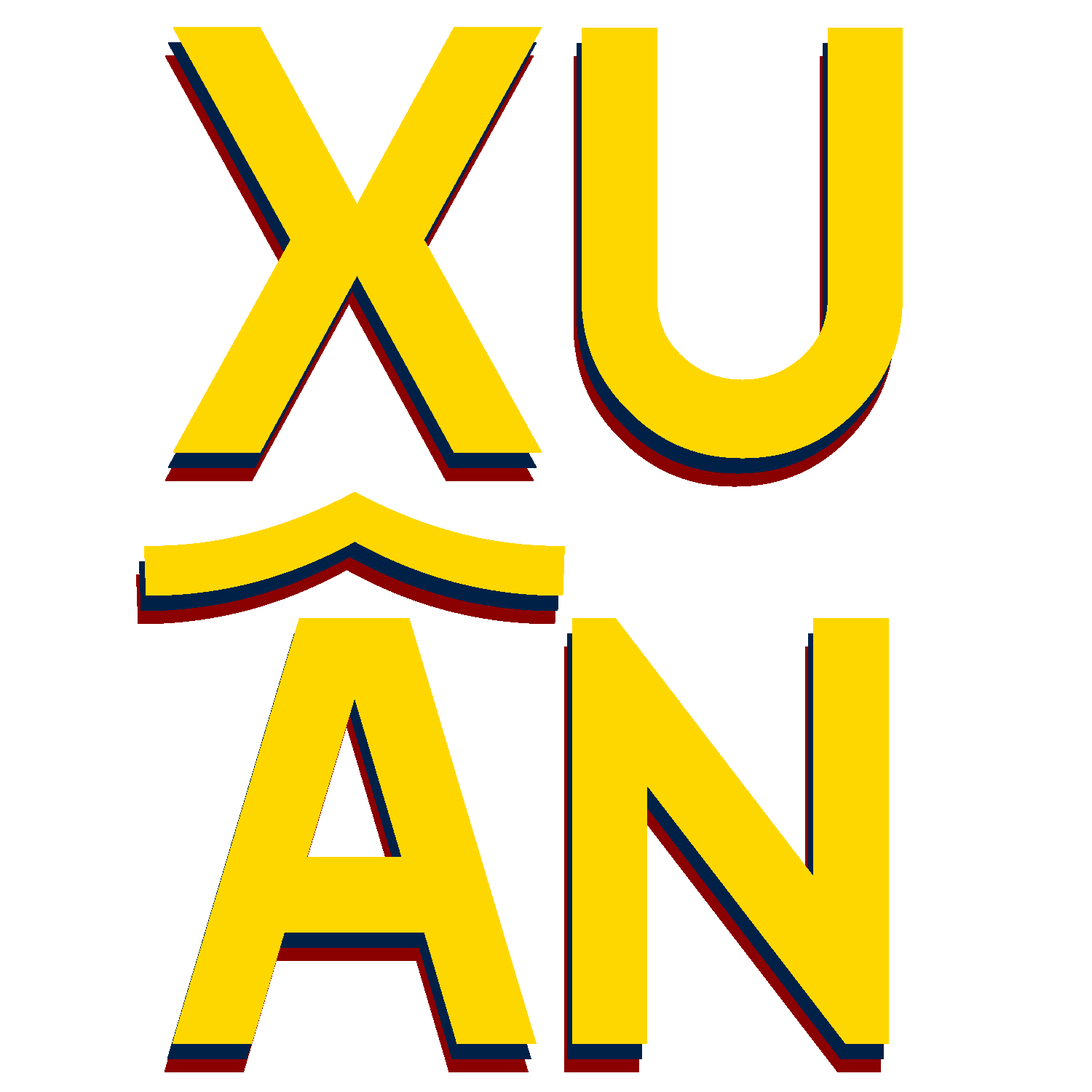
<style>
.page{position:relative;width:1092px;height:1092px;background:#ffffff}
.page>*{position:absolute;margin:0}
.t1{font:606.7px "1FTVHFGesco";color:#ffd700}
</style>
<div class="page">
<p class="t1" style="left:173px;top:27px;width:730px;height:432px">XU</p>
<p class="t1" style="left:168px;top:42px;width:730px;height:432px">XU</p>
<p class="t1" style="left:165px;top:55px;width:730px;height:432px">XU</p>
<p class="t1" style="left:144px;top:492px;width:745px;height:552px">ÂN</p>
<p class="t1" style="left:139px;top:507px;width:745px;height:552px">ÂN</p>
<p class="t1" style="left:136px;top:521px;width:745px;height:551px">ÂN</p>
</div>
